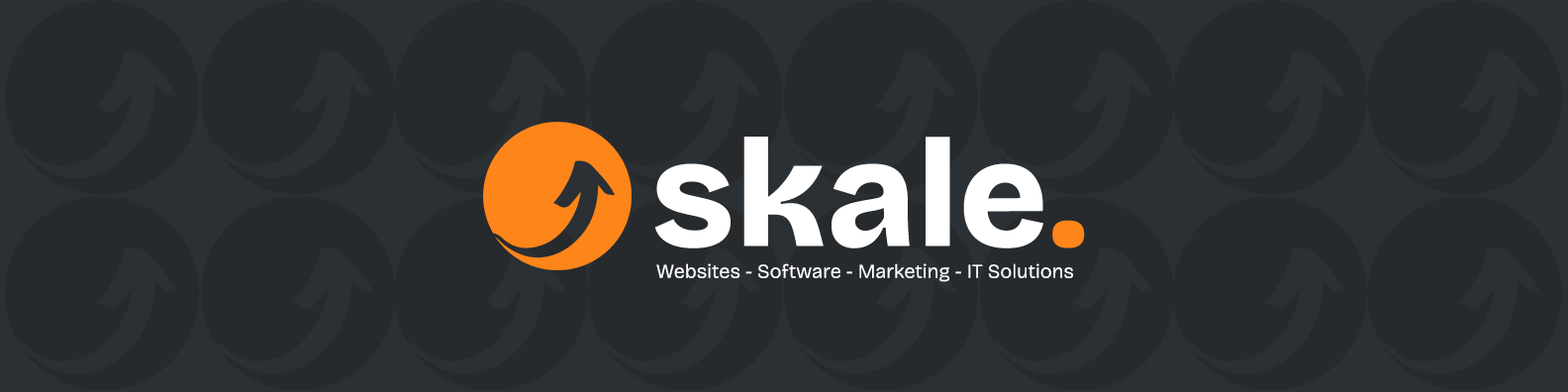
<style>
.page{position:relative;width:1568px;height:392px;background:#272a2d}
.page>*{position:absolute;margin:0}
.t1{font:19.8px "BricolageGrotesque-Light";color:#ffffff}
</style>
<div class="page">
<p class="t1" style="left:656px;top:263px;width:417px;height:19px">Websites - Software - Marketing - IT Solutions</p>
</div>
